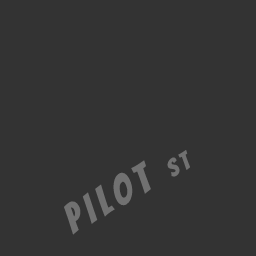
<style>
.page{position:relative;width:256px;height:256px;background:#333333}
.page>*{position:absolute;margin:0}
.t1{font:40px "Bangers-Regular";letter-spacing:0.16em;color:#717171}
.t2{font:24px "Bangers-Regular";letter-spacing:0.16em;color:#717171}
</style>
<div class="page">
<p class="t1" style="left:64px;top:150px;width:126px;height:85px;rotate:-30deg">PILOT <span class="t2">ST</span></p>
</div>
